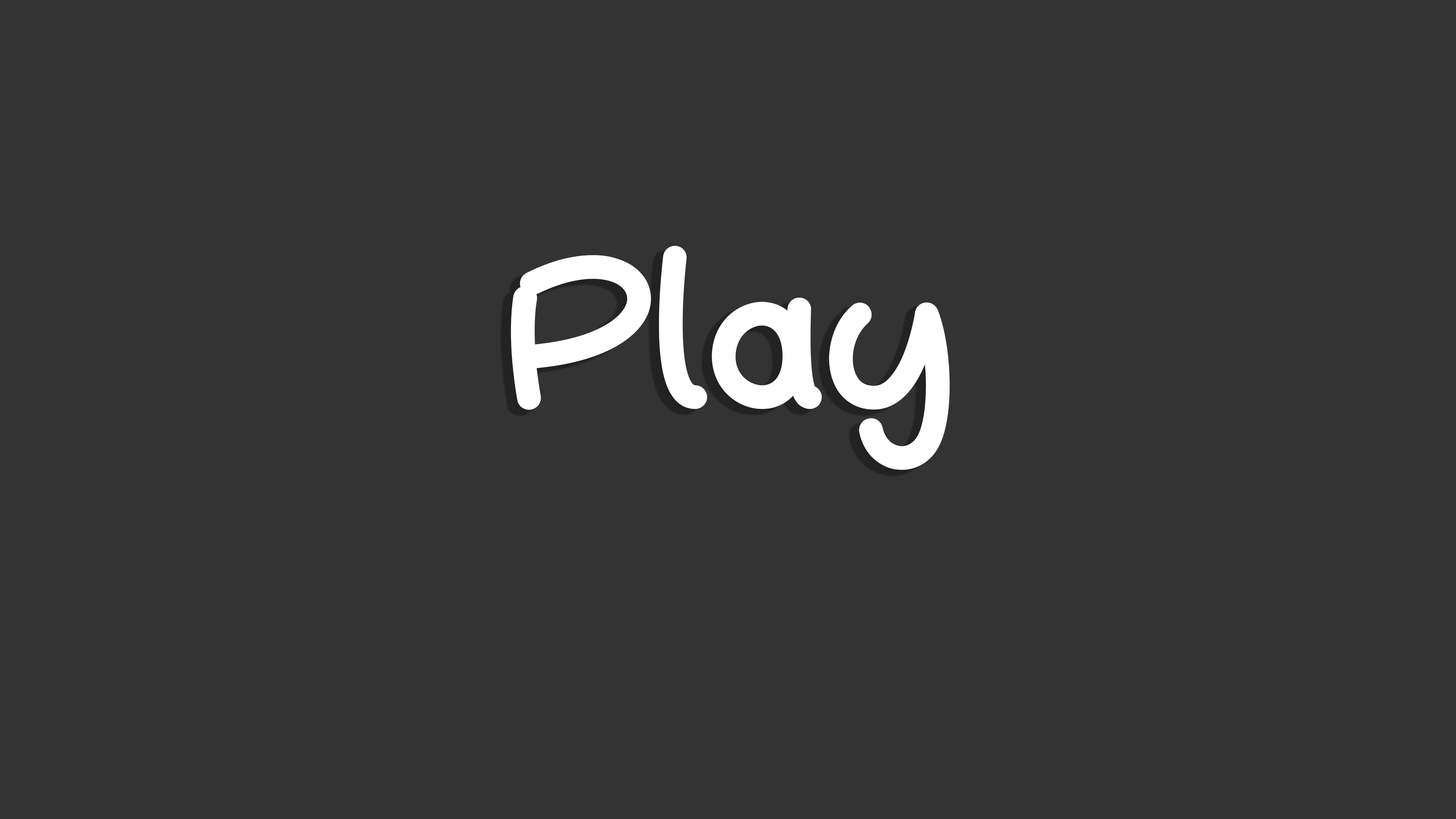
<style>
.page{position:relative;width:1456px;height:819px;background:#333333}
.page>*{position:absolute;margin:0}
.t1{font:237px "OhWhale";color:#ffffff}
</style>
<div class="page">
<p class="t1" style="left:511px;top:246px;width:439px;height:224px">Play</p>
</div>
